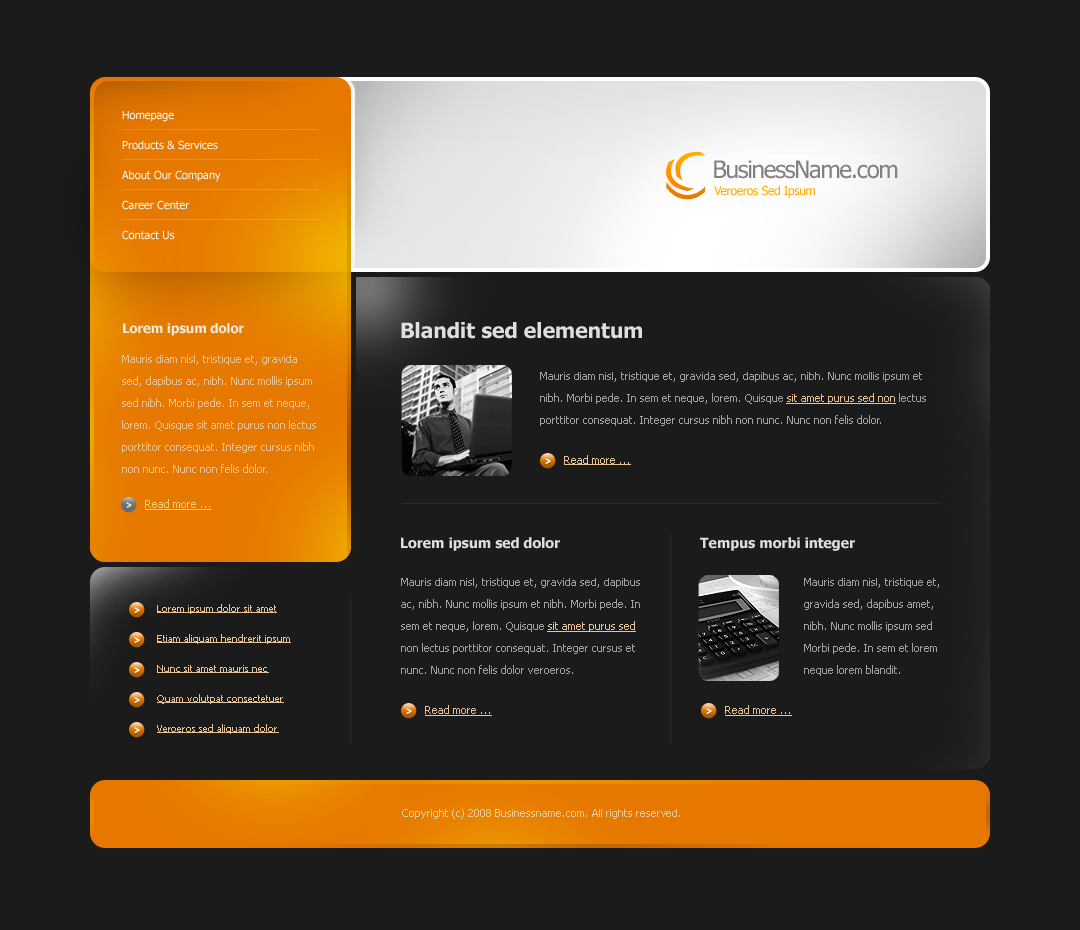
<style>
.page{position:relative;width:1080px;height:930px;background:#1b1b1b}
.page>*{position:absolute;margin:0}
.t1{font:11px/30px "Tahoma";color:#fafafa}
.t2{font:24px "Tahoma";letter-spacing:-0.05em;color:#818181}
.t3{font:12px "Tahoma";letter-spacing:-0.025em;color:#ffae00}
.t4{font:13px "Tahoma-Bold";color:#f3f3f3}
.t5{font:21px "Tahoma-Bold";color:#f3f3f3}
.t6{font:11px/22px "Tahoma";color:#eec292}
.t7{font:11px/22px "Tahoma";color:#a2a2a2}
.t8{font:11px/22px "Tahoma";color:#e9c397;text-decoration:underline}
.t9{font:11px "Tahoma";color:#e9c397;text-decoration:underline}
.t10{font:11px "Tahoma";color:#ffdb80;text-decoration:underline}
.t11{font:14px "Tahoma-Bold";color:#f3f3f3}
.t12{font:10px/30px "Tahoma";color:#e9c397;text-decoration:underline}
.t13{font:11px "Tahoma";color:#f5cb99}
</style>
<div class="page">
<p class="t1" style="left:122px;top:111px;width:98px;height:129px">Homepage<br>Products &amp; Services<br>About Our Company<br>Career Center<br>Contact Us</p>
<p class="t2" style="left:714px;top:160px;width:184px;height:19px">BusinessName.com</p>
<p class="t3" style="left:714px;top:186px;width:101px;height:12px">Veroeros Sed Ipsum</p>
<p class="t4" style="left:123px;top:323px;width:121px;height:13px;opacity:0.9">Lorem ipsum dolor</p>
<p class="t5" style="left:401px;top:322px;width:241px;height:17px;opacity:0.9">Blandit sed elementum</p>
<p class="t6" style="left:122px;top:355px;width:194px;height:118px">Mauris diam nisl, tristique et, gravida sed, dapibus ac, nibh. Nunc mollis ipsum sed nibh. Morbi pede. In sem et neque, lorem. Quisque sit amet purus non lectus porttitor consequat. Integer cursus nibh non nunc. Nunc non felis dolor.</p>
<p class="t7" style="left:540px;top:372px;width:386px;height:54px">Mauris diam nisl, tristique et, gravida sed, dapibus ac, nibh. Nunc mollis ipsum et nibh. Morbi pede. In sem et neque, lorem. Quisque <span class="t8">sit amet purus sed non</span> lectus porttitor consequat. Integer cursus nibh non nunc. Nunc non felis dolor.</p>
<p class="t9" style="left:564px;top:455px;width:67px;height:10px">Read more ...</p>
<p class="t10" style="left:145px;top:499px;width:67px;height:11px;opacity:0.9">Read more ...</p>
<p class="t11" style="left:401px;top:537px;width:159px;height:14px;opacity:0.9">Lorem ipsum sed dolor</p>
<p class="t11" style="left:700px;top:537px;width:155px;height:14px;opacity:0.9">Tempus morbi integer</p>
<p class="t7" style="left:401px;top:578px;width:239px;height:96px">Mauris diam nisl, tristique et, gravida sed, dapibus ac, nibh. Nunc mollis ipsum et nibh. Morbi pede. In sem et neque, lorem. Quisque <span class="t8">sit amet purus sed</span> non lectus porttitor consequat. Integer cursus et nunc. Nunc non felis dolor veroeros.</p>
<p class="t7" style="left:804px;top:578px;width:135px;height:98px">Mauris diam nisl, tristique et, gravida sed, dapibus amet, nibh. Nunc mollis ipsum sed Morbi pede. In sem et lorem neque lorem blandit.</p>
<p class="t12" style="left:157px;top:604px;width:134px;height:130px">Lorem ipsum dolor sit amet<br>Etiam aliquam hendrerit ipsum<br>Nunc sit amet mauris nec<br>Quam volutpat consectetuer<br>Veroeros sed aliquam dolor</p>
<p class="t9" style="left:425px;top:705px;width:67px;height:11px">Read more ...</p>
<p class="t9" style="left:725px;top:705px;width:67px;height:11px">Read more ...</p>
<p class="t13" style="left:402px;top:809px;width:278px;height:10px">Copyright (c) 2008 Businessname.com. All rights reserved.</p>
</div>
